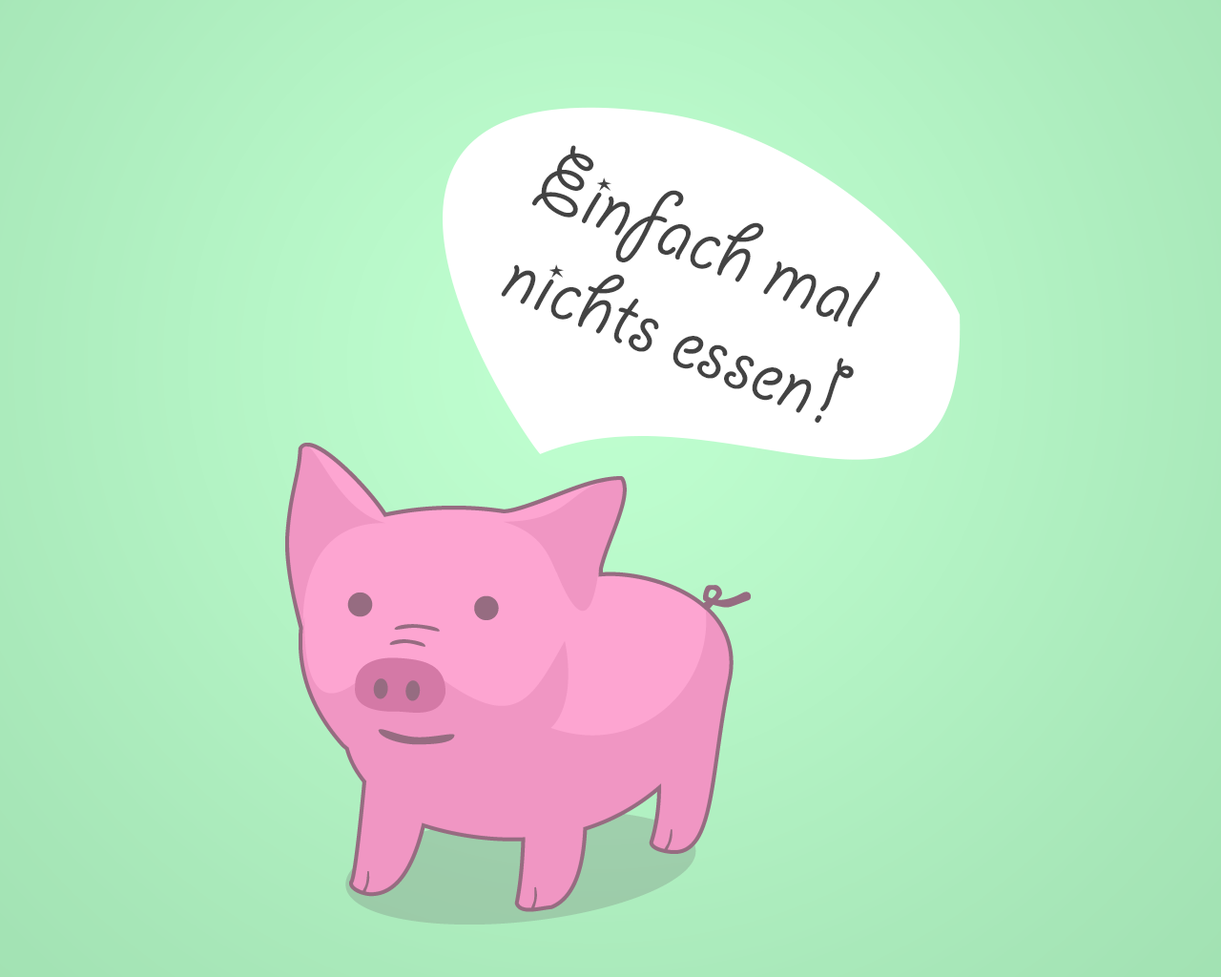
<style>
.page{position:relative;width:1221px;height:977px}
.page>*{position:absolute;margin:0}
.t1{font:98.6px/98.9px "GiddyupStd";color:#434343}
</style>
<div class="page">
<p class="t1" style="left:501px;top:145px;width:379px;height:278px;text-align:center;rotate:22deg">Einfach mal <br>nichts essen!</p>
</div>
